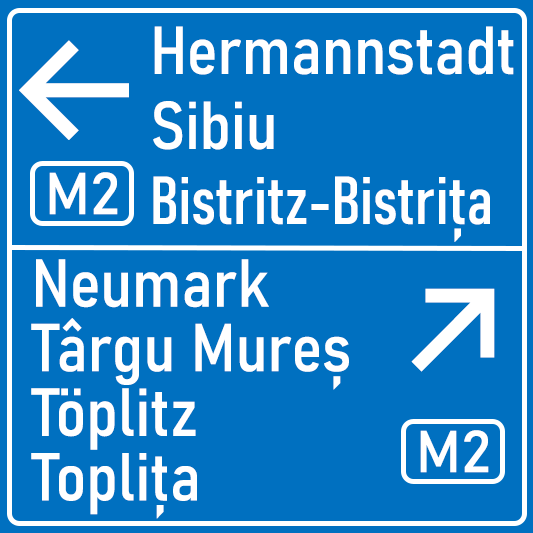
<style>
.page{position:relative;width:533px;height:533px;background:#0070c0}
.page>*{position:absolute;margin:0}
.t1{font:66.7px/75px "Bahnschrift-SemiCondensed";letter-spacing:-0.005em;color:#ffffff}
.t2{font:66.7px/75px "Bahnschrift-Condensed";color:#ffffff}
.t3{font:150px "Inter-Medium";color:#ffffff}
.t4{font:58.3px "Bahnschrift";color:#ffffff}
.t5{font:66.7px/64.6px "Bahnschrift-SemiCondensed";color:#ffffff}
</style>
<div class="page">
<p class="t1" style="left:153px;top:26px;width:361px;height:216px">Hermannstadt<br>Sibiu<br><span class="t2">Bistritz-Bistrița</span></p>
<p class="t3" style="left:19px;top:40px;width:110px;height:100px">←</p>
<p class="t4" style="left:49px;top:172px;width:69px;height:43px">M2</p>
<p class="t5" style="left:31px;top:259px;width:318px;height:260px">Neumark<br>Târgu Mureș<br>Töplitz<br>Toplița</p>
<p class="t3" style="left:411px;top:288px;width:84px;height:84px">↗</p>
<p class="t4" style="left:420px;top:430px;width:69px;height:43px">M2</p>
</div>
